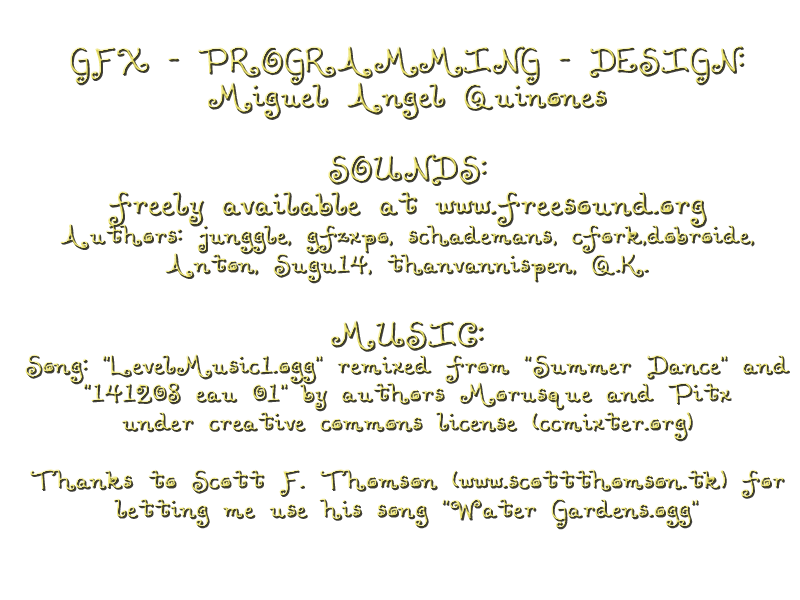
<style>
.page{position:relative;width:800px;height:600px;background:#ffffff}
.page>*{position:absolute;margin:0}
.t1{font:24px "Lollipop"}
.t2{font:30px "Lollipop"}
</style>
<div class="page">
<p class="t1" style="left:25px;top:45px;width:764px;height:484px;text-align:center"><span class="t2">GFX - PROGRAMMING - DESIGN:<br>Miguel Angel Quinones<br><br>SOUNDS: <br>freely available at www.freesound.org<br></span>Authors: junggle, gfzxpo, schademans, cfork,dobroide,<br>Anton, Sugu14, thanvannispen, Q.K.<br><span class="t2"><br>MUSIC:<br></span>Song: “LevelMusic1.ogg” remixed from “Summer Dance” and “141208 eau 01” by authors Morusque and Pitx<br>under creative commons license (ccmixter.org)<br><br>Thanks to Scott F. Thomson (www.scottthomson.tk) for letting me use his song “Water Gardens.ogg”</p>
</div>
